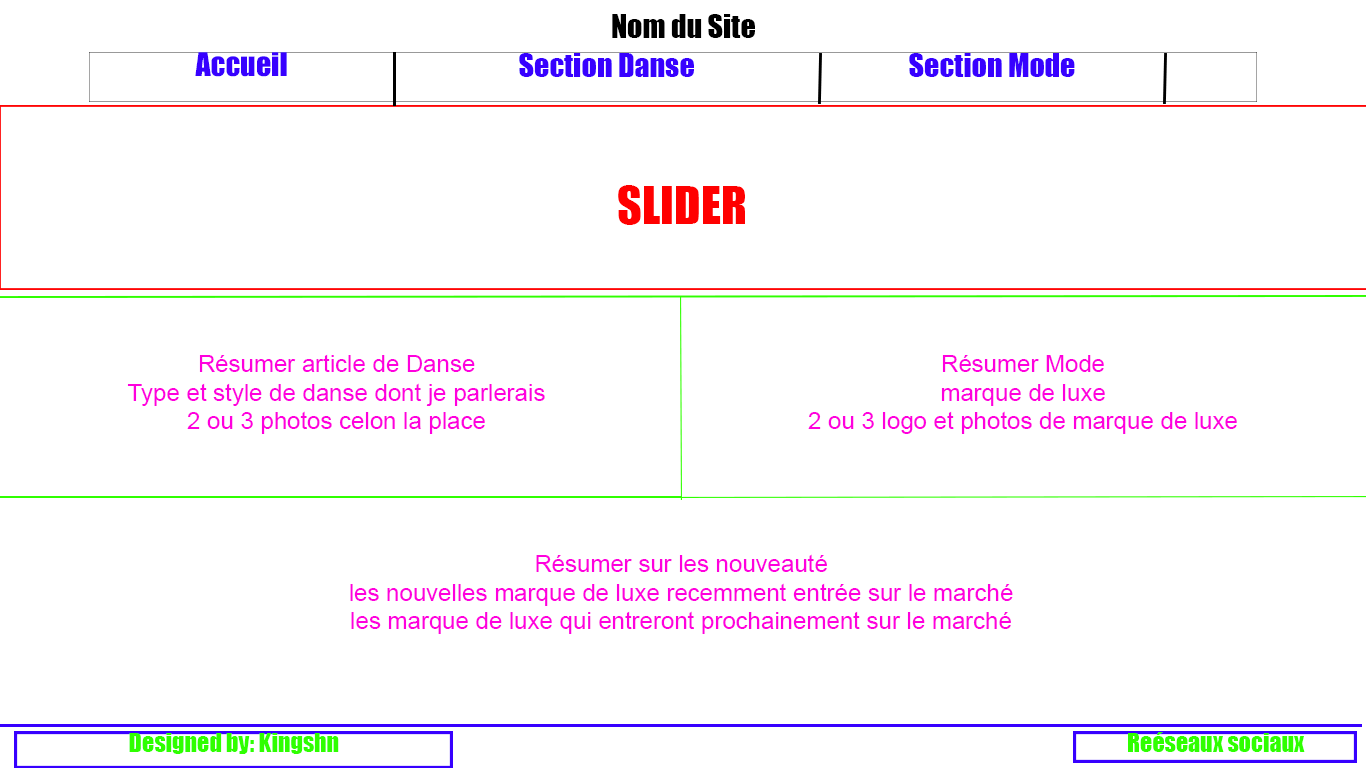
<style>
.page{position:relative;width:1366px;height:768px;background:#ffffff}
.page>*{position:absolute;margin:0}
.t1{font:30px "Impact";color:#000000}
.t2{font:30px "Impact";color:#3700ff}
.t3{font:48px "Impact";color:#ff0000}
.t4{font:24px "ArialMT";color:#ff00de}
.t5{font:24px "Impact";color:#2fff00}
</style>
<div class="page">
<p class="t1" style="left:612px;top:14px;width:143px;height:24px">Nom du Site</p>
<p class="t2" style="left:195px;top:52px;width:92px;height:25px">Accueil</p>
<p class="t2" style="left:519px;top:53px;width:175px;height:24px">Section Danse</p>
<p class="t2" style="left:909px;top:53px;width:166px;height:24px">Section Mode</p>
<p class="t3" style="left:618px;top:185px;width:127px;height:40px">SLIDER</p>
<p class="t4" style="left:127px;top:354px;width:418px;height:80px;text-align:center">Résumer article de Danse<br>Type et style de danse dont je parlerais<br>2 ou 3 photos celon la place</p>
<p class="t4" style="left:808px;top:355px;width:429px;height:79px;text-align:center">Résumer Mode<br>marque de luxe<br>2 ou 3 logo et photos de marque de luxe</p>
<p class="t4" style="left:350px;top:554px;width:663px;height:80px;text-align:center">Résumer sur les nouveauté<br>les nouvelles marque de luxe recemment entrée sur le marché<br>les marque de luxe qui entreront prochainement sur le marché</p>
<p class="t5" style="left:129px;top:733px;width:210px;height:21px">Designed by: Kingshn</p>
<p class="t5" style="left:1128px;top:732px;width:177px;height:20px">Reéseaux sociaux</p>
</div>
